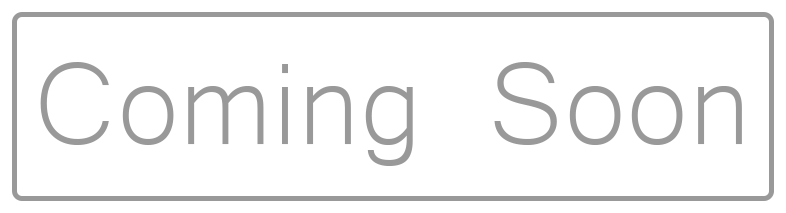
<style>
.page{position:relative;width:786px;height:213px;background:#ffffff}
.page>*{position:absolute;margin:0}
.t1{font:150px "Microsoft-Yi-Baiti";color:#999999}
</style>
<div class="page">
<p class="t1" style="left:40px;top:62px;width:702px;height:104px">Coming Soon</p>
</div>
